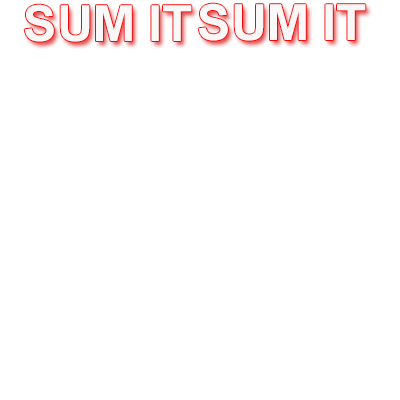
<style>
.page{position:relative;width:400px;height:400px;background:#ffffff}
.page>*{position:absolute;margin:0}
.t1{font:50px "Arial-BoldMT";color:#f9f8f8}
</style>
<div class="page">
<p class="t1" style="left:24px;top:4px;width:168px;height:38px">SUM IT</p>
<p class="t1" style="left:198px;top:3px;width:168px;height:38px">SUM IT</p>
</div>
